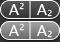
<style>
.page{position:relative;width:60px;height:42px}
.page>*{position:absolute;margin:0}
.t1{font:15px "LucidaGrande";letter-spacing:-0.025em;color:#ffffff}
.t2{font:8px "LucidaGrande";letter-spacing:-0.025em;color:#ffffff}
</style>
<div class="page">
<p class="t1" style="left:9px;top:4px;width:10px;height:11px">A</p>
<p class="t2" style="left:19px;top:2px;width:5px;height:8px">2</p>
<p class="t1" style="left:37px;top:4px;width:10px;height:11px">A</p>
<p class="t2" style="left:47px;top:9px;width:5px;height:8px">2</p>
<p class="t1" style="left:9px;top:25px;width:10px;height:11px">A</p>
<p class="t2" style="left:19px;top:23px;width:5px;height:8px">2</p>
<p class="t1" style="left:37px;top:25px;width:10px;height:11px">A</p>
<p class="t2" style="left:47px;top:30px;width:5px;height:8px">2</p>
</div>
